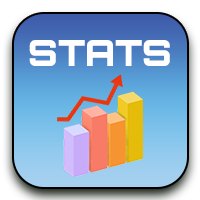
<style>
.page{position:relative;width:200px;height:200px}
.page>*{position:absolute;margin:0}
.t1{font:36px "Orbitron-Black";color:#ffffff}
</style>
<div class="page">
<p class="t1" style="left:29px;top:40px;width:141px;height:26px">STATS</p>
</div>
